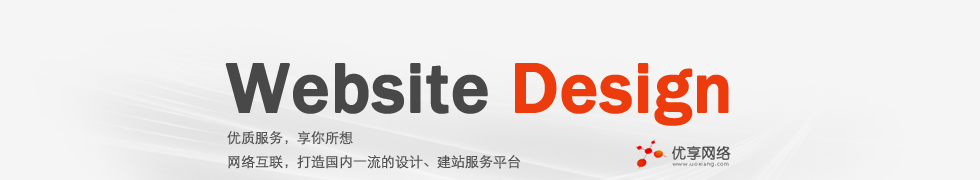
<style>
.page{position:relative;width:980px;height:180px;background:#f5f5f5}
.page>*{position:absolute;margin:0}
.t1{font:72px "FranklinGothic-Medium";color:#484848;font-weight:bold}
.t2{font:72px "FranklinGothic-Medium";color:#ec3c0d;font-weight:bold}
.t3{font:14px/24px "STXihei";color:#515151}
</style>
<div class="page">
<p class="t1" style="left:225px;top:63px;width:504px;height:63px">Website <span class="t2">Design</span></p>
<p class="t3" style="left:227px;top:131px;width:294px;height:38px">优质服务，享你所想<br>网络互联，打造国内一流的设计、建站服务平台</p>
</div>
